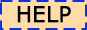
<style>
.page{position:relative;width:87px;height:30px;background:#ffdbaa}
.page>*{position:absolute;margin:0}
.t1{font:21px "Verdana";color:#000000;font-weight:bold}
</style>
<div class="page">
<p class="t1" style="left:17px;top:6px;width:54px;height:17px">HELP</p>
</div>
